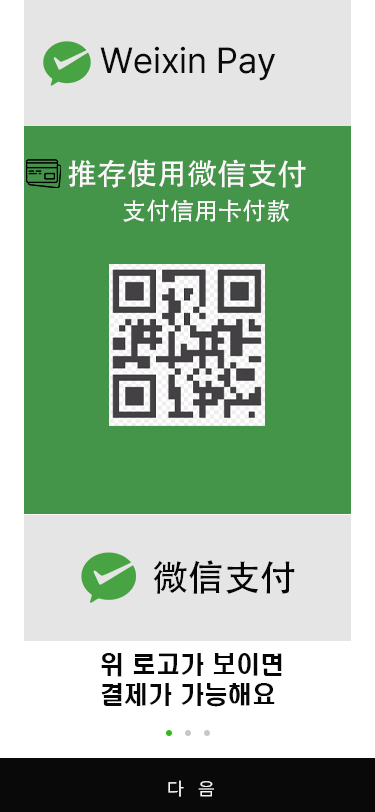
<style>
.page{position:relative;width:375px;height:812px;background:#44944a}
.page>*{position:absolute;margin:0}
.t1{font:36px "Pretendard-Regular";color:#0b0a0a}
.t2{font:30px "AdobeHeitiStd-Regular";color:#f9f7f7}
.t3{font:24px "AdobeHeitiStd-Regular";color:#f9f7f7}
.t4{font:36px "AdobeHeitiStd-Regular";color:#060606}
.t5{font:24px/30px "H2hdrM";color:#060606}
.t6{font:18px "Pretendard-Regular";color:#f2f6f2;scale:1.07 1}
</style>
<div class="page">
<p class="t1" style="left:100px;top:46px;width:176px;height:35px">Weixin Pay</p>
<p class="t2" style="left:68px;top:159px;width:238px;height:29px">推存使用微信支付</p>
<p class="t3" style="left:123px;top:199px;width:166px;height:23px">支付信用卡付款</p>
<p class="t4" style="left:153px;top:560px;width:142px;height:34px">微信支付</p>
<p class="t5" style="left:101px;top:653px;width:181px;height:54px">위 로고가 보이면<br>결제가 가능해요</p>
<p class="t6" style="left:168px;top:780px;width:46px;height:17px">다   음</p>
</div>
